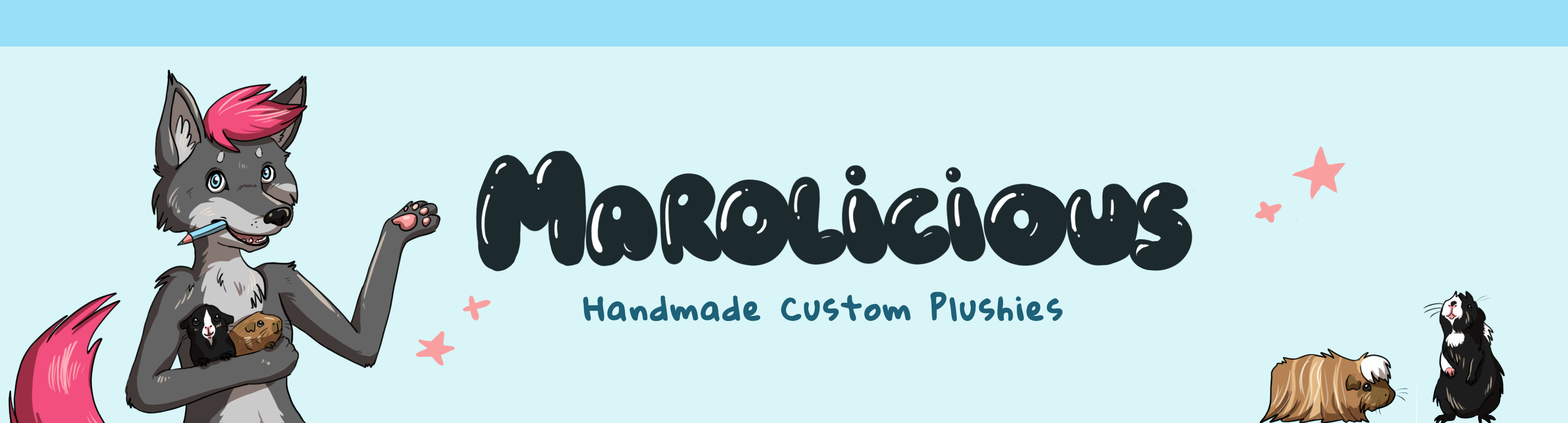
<style>
.page{position:relative;width:1568px;height:423px;background:#d9f5f8}
.page>*{position:absolute;margin:0}
.t1{font:30.3px "GloriaHallelujah";letter-spacing:0.1em;color:#1e6178;font-weight:bold}
</style>
<div class="page">
<p class="t1" style="left:584px;top:293px;width:478px;height:28px">Handmade Custom Plushies</p>
</div>
